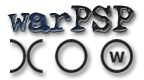
<style>
.page{position:relative;width:144px;height:80px;background:#ffffff}
.page>*{position:absolute;margin:0}
.t1{font:40px "Ghostwriter"}
</style>
<div class="page">
<p class="t1" style="left:7px;top:5px;width:128px;height:28px">warPSP</p>
</div>
